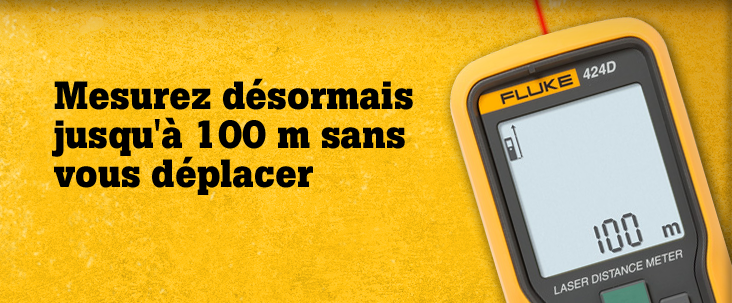
<style>
.page{position:relative;width:732px;height:303px}
.page>*{position:absolute;margin:0}
.t1{font:39px/39px "BotonPro-Bold";letter-spacing:-0.01em;color:#000000}
</style>
<div class="page">
<p class="t1" style="left:52px;top:78px;width:361px;height:117px">Mesurez désormais jusqu'à 100 m sans vous déplacer</p>
</div>
